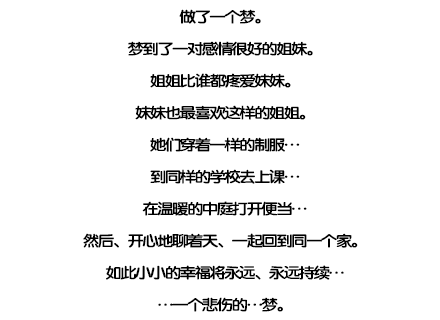
<style>
.page{position:relative;width:440px;height:320px;background:#ffffff}
.page>*{position:absolute;margin:0}
.t1{font:15px/32px "FZY4K--GBK1-0";letter-spacing:-0.13em;color:#000000;scale:1.14 1}
</style>
<div class="page">
<p class="t1" style="left:83px;top:9px;width:275px;height:303px;text-align:center">做了一个梦。<br>梦到了一对感情很好的姐妹。<br>姐姐比谁都疼爱妹妹。<br>妹妹也最喜欢这样的姐姐。<br>她们穿着一样的制服…<br>到同样的学校去上课…<br>在温暖的中庭打开便当…<br>然后、开心地聊着天、一起回到同一个家。<br>如此小小的幸福将永远、永远持续…<br>…一个悲伤的…梦。</p>
</div>
